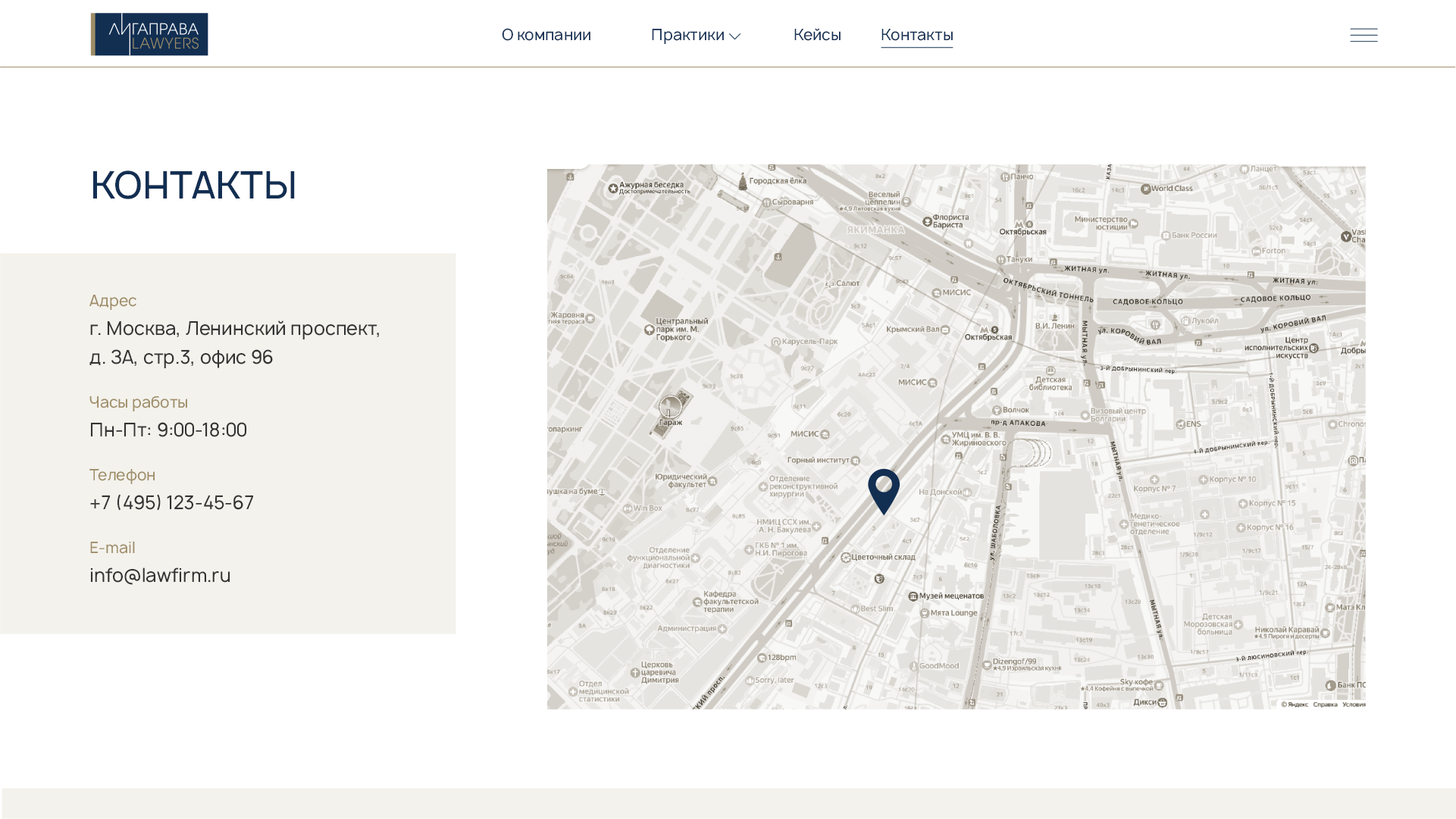
<style>
.page{position:relative;width:1456px;height:819px;background:#ffffff}
.page>*{position:absolute;margin:0}
.t1{font:15.2px "Manrope-Regular";color:#122f52}
.t2{font:36.4px "Manrope-Medium";color:#122f52}
.t3{font:18.2px/28.8px "Manrope-Regular";color:#333333}
.t4{font:15.2px/28.8px "Manrope-Regular";color:#9e8d68}
</style>
<div class="page">
<p class="t1" style="left:502px;top:28px;width:88px;height:13px">О компании</p>
<p class="t1" style="left:652px;top:29px;width:72px;height:15px">Практики</p>
<p class="t1" style="left:794px;top:28px;width:46px;height:13px">Кейсы</p>
<p class="t1" style="left:881px;top:29px;width:72px;height:12px">Контакты</p>
<p class="t2" style="left:93px;top:170px;width:202px;height:29px">КОНТАКТЫ</p>
<p class="t3" style="left:89px;top:295px;width:290px;height:290px"><span class="t4">Адрес<br></span>г. Москва, Ленинский проспект,<br>д. ЗА, стр.3, офис 96<br><span class="t4">Часы работы<br></span>Пн-Пт: 9:00-18:00<br><span class="t4">Телефон<br></span>+7 (495) 123-45-67<br><span class="t4">E-mail<br></span>info@lawfirm.ru</p>
</div>
